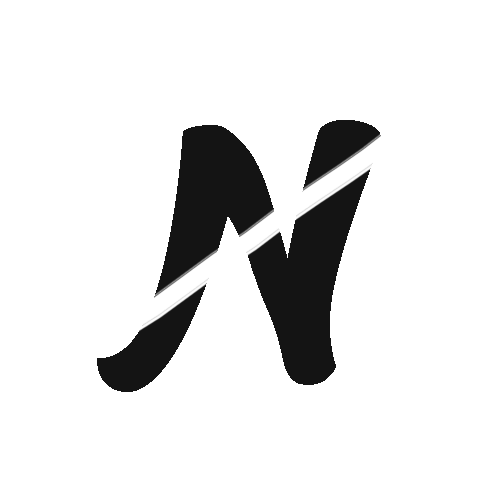
<style>
.page{position:relative;width:500px;height:500px;background:#ffffff}
.page>*{position:absolute;margin:0}
.t1{font:366.7px "Billyer";color:#141414;text-transform:uppercase}
</style>
<div class="page">
<p class="t1" style="left:97px;top:120px;width:284px;height:272px">N</p>
</div>
